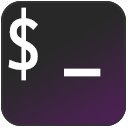
<style>
.page{position:relative;width:128px;height:128px;background:#282828}
.page>*{position:absolute;margin:0}
.t1{font:72px "CascadiaCode-Regular";color:#ffffff;scale:0.88 1}
.t2{font:84px "CascadiaCode-Regular";color:#ffffff;scale:0.88 1}
</style>
<div class="page">
<p class="t1" style="left:8px;top:7px;width:93px;height:74px">$ <span class="t2">_</span></p>
</div>
